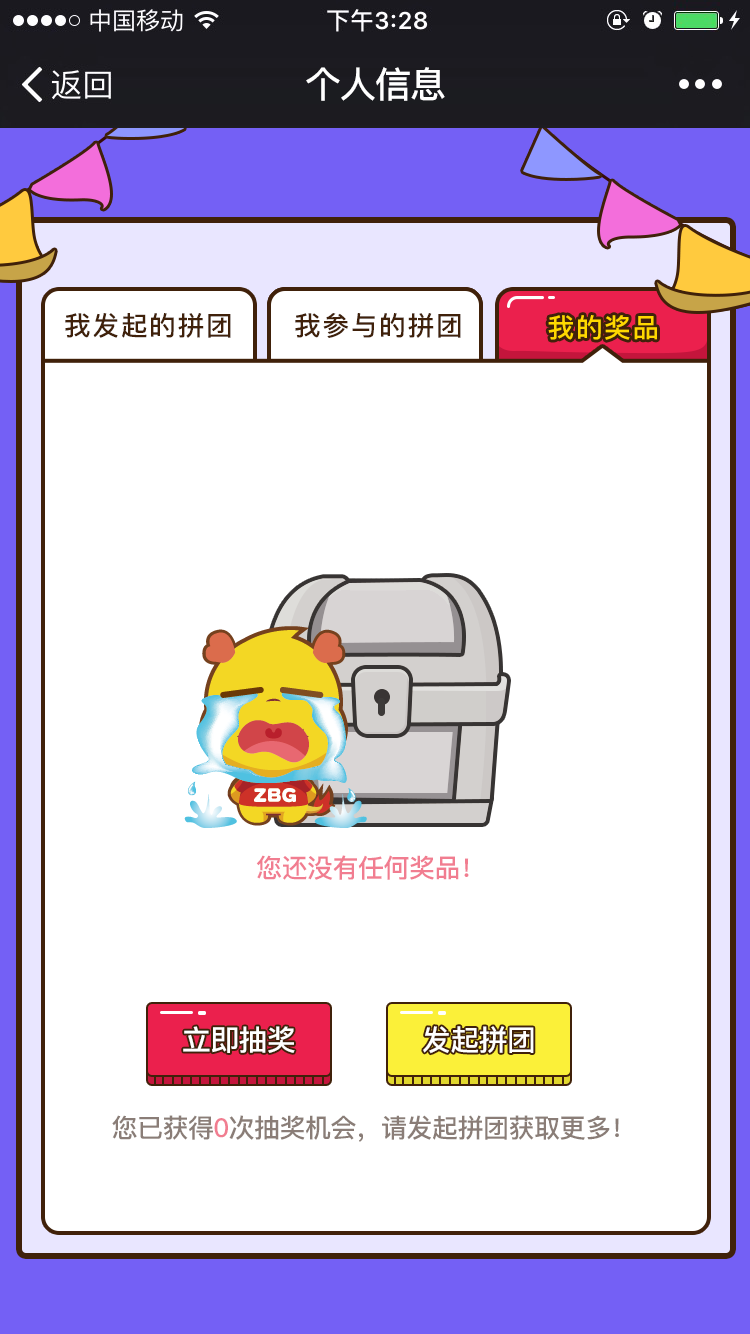
<style>
.page{position:relative;width:750px;height:1334px;background:#ffffff}
.page>*{position:absolute;margin:0}
.t1{font:36px "PingFang-SC-Bold";letter-spacing:-0.02em;color:#ffffff}
.t2{font:26.7px "PingFang-SC-Bold";letter-spacing:0.06em;color:#40210a}
.t3{font:26.7px "PingFang-SC-Bold";letter-spacing:0.06em;color:#ffd800}
.t4{font:26px "PingFang-SC-Bold";letter-spacing:-0.02em;color:#f17d90}
.t5{font:28.8px "PingFang-SC-Bold";letter-spacing:-0.02em;color:#ffffff}
.t6{font:26px "PingFang-SC-Bold";letter-spacing:-0.02em;color:#8a7d77}
</style>
<div class="page">
<p class="t1" style="left:306px;top:67px;width:139px;height:34px">个人信息</p>
<p class="t2" style="left:65px;top:313px;width:166px;height:25px">我发起的拼团</p>
<p class="t2" style="left:295px;top:313px;width:166px;height:25px">我参与的拼团</p>
<p class="t3" style="left:548px;top:315px;width:109px;height:25px">我的奖品</p>
<p class="t4" style="left:256px;top:855px;width:213px;height:25px">您还没有任何奖品！</p>
<p class="t5" style="left:183px;top:1026px;width:112px;height:27px">立即抽奖</p>
<p class="t5" style="left:423px;top:1026px;width:111px;height:28px">发起拼团</p>
<p class="t6" style="left:112px;top:1115px;width:507px;height:27px">您已获得0次抽奖机会，请发起拼团获取更多！</p>
</div>
